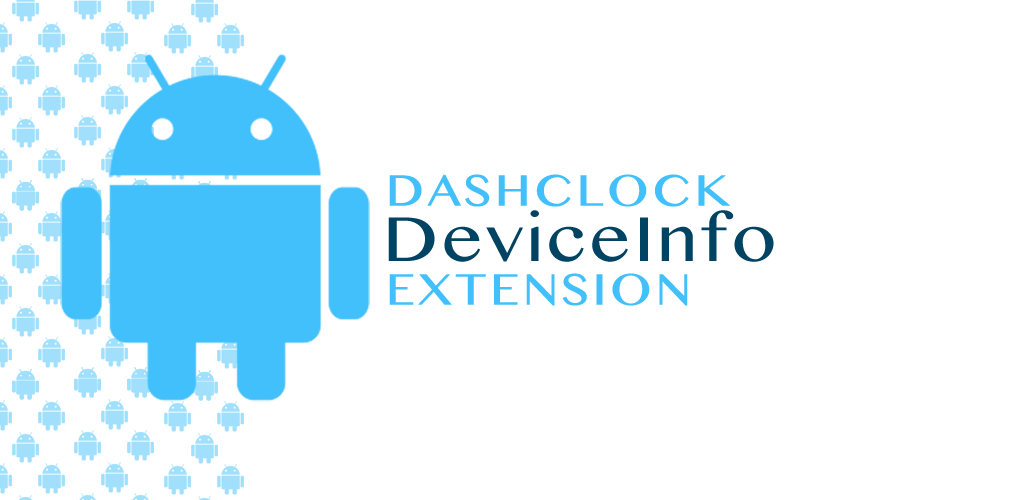
<style>
.page{position:relative;width:1024px;height:500px;background:#ffffff}
.page>*{position:absolute;margin:0}
.t1{font:44px "TamilMN";letter-spacing:0.05em;color:#42c0fb;text-transform:uppercase;font-weight:bold;scale:1.1 1}
.t2{font:64px "TamilMN";letter-spacing:0.05em;color:#004362;scale:1.1 1}
</style>
<div class="page">
<p class="t1" style="left:389px;top:174px;width:341px;height:33px">DashClock</p>
<p class="t2" style="left:388px;top:210px;width:386px;height:52px">DeviceInfo</p>
<p class="t1" style="left:389px;top:273px;width:299px;height:33px">Extension</p>
</div>
